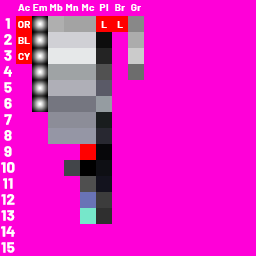
<style>
.page{position:relative;width:256px;height:256px;background:#ff00d8}
.page>*{position:absolute;margin:0}
.t1{font:9.8px "Barlow-Bold";letter-spacing:0.02em;color:#ffffff}
.t2{font:14.7px "Barlow-Bold";letter-spacing:0.02em;color:#ffffff}
</style>
<div class="page">
<p class="t1" style="left:18px;top:4px;width:12px;height:7px">Ac</p>
<p class="t1" style="left:33px;top:4px;width:14px;height:7px">Emi</p>
<p class="t1" style="left:50px;top:4px;width:13px;height:7px">Mb</p>
<p class="t1" style="left:66px;top:4px;width:13px;height:7px">Mn</p>
<p class="t1" style="left:82px;top:4px;width:13px;height:7px">Mc</p>
<p class="t1" style="left:99px;top:4px;width:10px;height:7px">Pl</p>
<p class="t1" style="left:115px;top:4px;width:10px;height:7px">Br</p>
<p class="t1" style="left:131px;top:4px;width:10px;height:7px">Gr</p>
<p class="t2" style="left:5px;top:18px;width:5px;height:11px">1</p>
<p class="t1" style="left:18px;top:21px;width:12px;height:7px">OR</p>
<p class="t1" style="left:101px;top:21px;width:6px;height:7px">L</p>
<p class="t1" style="left:117px;top:21px;width:6px;height:7px">L</p>
<p class="t2" style="left:4px;top:34px;width:8px;height:11px">2</p>
<p class="t1" style="left:18px;top:37px;width:12px;height:7px">BL</p>
<p class="t2" style="left:4px;top:50px;width:8px;height:11px">3</p>
<p class="t1" style="left:18px;top:53px;width:12px;height:7px">CY</p>
<p class="t2" style="left:3px;top:66px;width:9px;height:11px">4</p>
<p class="t2" style="left:4px;top:82px;width:8px;height:11px">5</p>
<p class="t2" style="left:4px;top:98px;width:8px;height:11px">6</p>
<p class="t2" style="left:4px;top:114px;width:8px;height:11px">7</p>
<p class="t2" style="left:4px;top:130px;width:8px;height:11px">8</p>
<p class="t2" style="left:4px;top:146px;width:8px;height:11px">9</p>
<p class="t2" style="left:1px;top:162px;width:14px;height:11px">10</p>
<p class="t2" style="left:3px;top:178px;width:10px;height:11px">11</p>
<p class="t2" style="left:1px;top:194px;width:14px;height:11px">12</p>
<p class="t2" style="left:1px;top:210px;width:14px;height:11px">13</p>
<p class="t2" style="left:1px;top:226px;width:14px;height:11px">14</p>
<p class="t2" style="left:1px;top:242px;width:14px;height:11px">15</p>
</div>
